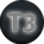
<style>
.page{position:relative;width:44px;height:44px}
.page>*{position:absolute;margin:0}
.t1{font:27.2px "MyriadPro-Bold";color:#848484}
</style>
<div class="page">
<p class="t1" style="left:7px;top:13px;width:29px;height:19px">T3</p>
<p class="t1" style="left:7px;top:13px;width:29px;height:19px">T3</p>
</div>
